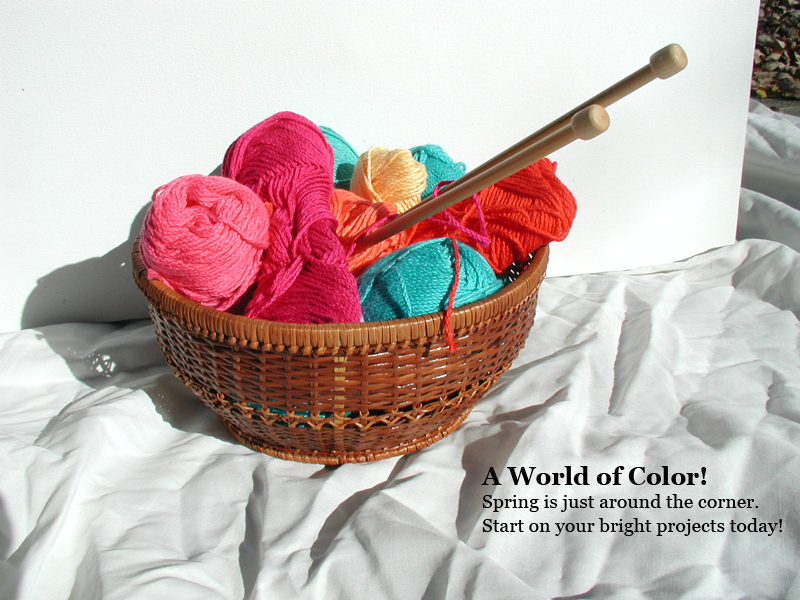
<style>
.page{position:relative;width:800px;height:600px}
.page>*{position:absolute;margin:0}
.t1{font:19.4px "Georgia";color:#000000}
.t2{font:25px "Georgia-Bold";color:#000000}
</style>
<div class="page">
<p class="t1" style="left:481px;top:466px;width:301px;height:70px"><span class="t2">A World of Color!<br></span>Spring is just around the corner. Start on your bright projects today!</p>
</div>
